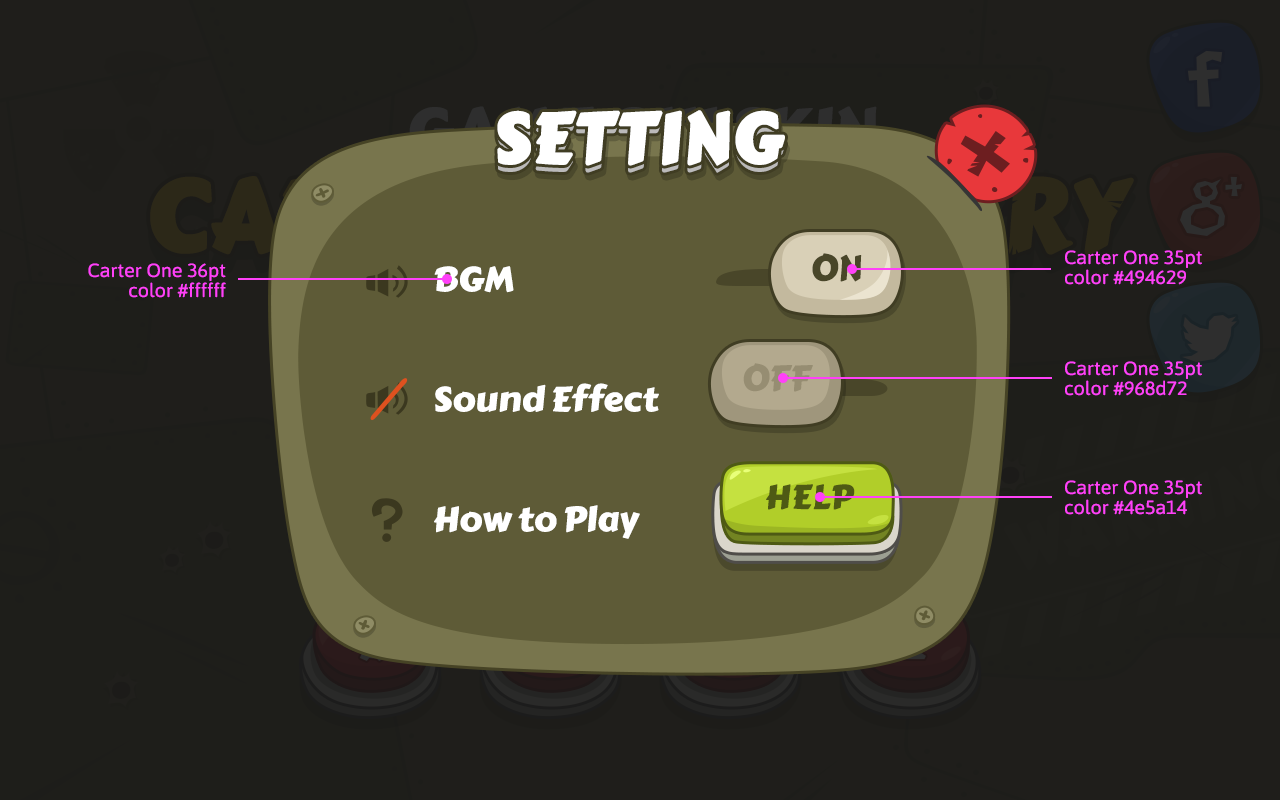
<style>
.page{position:relative;width:1280px;height:800px;background:#1f1e1b}
.page>*{position:absolute;margin:0}
.t1{font:70px "CarterOne";color:#ffffff;text-transform:uppercase;font-weight:bold}
.t2{font:35px "CarterOne";color:#494629;text-transform:uppercase}
.t3{font:19px/20px "Asap-Regular";letter-spacing:-0.01em;color:#ff41f8;scale:1.05 1}
.t4{font:34.2px/120px "CarterOne";letter-spacing:-0.025em;color:#ffffff;scale:1.06 1}
.t5{font:35px "CarterOne";color:#968d72;text-transform:uppercase}
.t6{font:33.2px "CarterOne";letter-spacing:-0.025em;color:#4e5a14;text-transform:uppercase;font-weight:bold;scale:1.05 1}
</style>
<div class="page">
<p class="t1" style="left:497px;top:110px;width:288px;height:56px">SETTING</p>
<p class="t1" style="left:497px;top:117px;width:288px;height:56px">SETTING</p>
<p class="t2" style="left:812px;top:253px;width:50px;height:29px">ON</p>
<p class="t3" style="left:1065px;top:250px;width:137px;height:35px">Carter One 35pt<br>color #494629</p>
<p class="t3" style="left:88px;top:263px;width:138px;height:35px;text-align:right">Carter One 36pt<br>color #ffffff</p>
<p class="t4" style="left:434px;top:266px;width:225px;height:273px">BGM<br>Sound Effect<br>How to Play</p>
<p class="t5" style="left:743px;top:363px;width:70px;height:29px">OFF</p>
<p class="t3" style="left:1065px;top:361px;width:137px;height:35px">Carter One 35pt<br>color #968d72</p>
<p class="t6" style="left:766px;top:484px;width:89px;height:26px">HELP</p>
<p class="t3" style="left:1065px;top:480px;width:137px;height:35px">Carter One 35pt<br>color #4e5a14</p>
</div>
